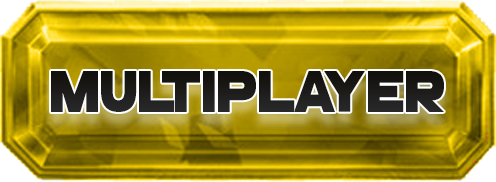
<style>
.page{position:relative;width:496px;height:182px}
.page>*{position:absolute;margin:0}
.t1{font:60px "GoGoPosterPunch";color:#1d1c1a}
</style>
<div class="page">
<p class="t1" style="left:51px;top:71px;width:393px;height:41px">multiPlayer</p>
</div>
